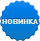
<style>
.page{position:relative;width:40px;height:41px;background:#ffffff}
.page>*{position:absolute;margin:0}
.t1{font:6.8px "System";color:#e9e9e9}
</style>
<div class="page">
<p class="t1" style="left:2px;top:19px;width:36px;height:5px">НОВИНКА</p>
</div>
